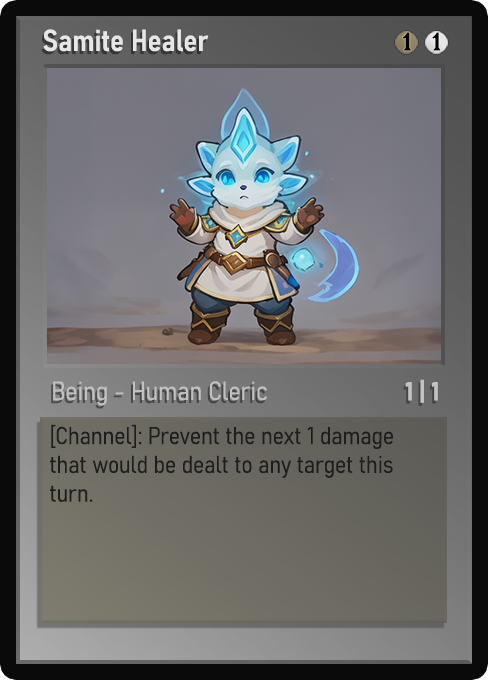
<style>
.page{position:relative;width:488px;height:680px}
.page>*{position:absolute;margin:0}
.t1{font:30px "Bahnschrift-SemiBoldSemiCondensed";color:#f2f2f2;font-weight:bold}
.t2{font:25px "WTRRoycroft";color:#000000;font-weight:bold;scale:1.09 1}
.t3{font:26px "Bahnschrift-LightSemiCondensed";color:#c8c8c8;font-weight:bold}
.t4{font:26px "Bahnschrift-BoldSemiCondensed";color:#c3c3c3;font-weight:bold}
.t5{font:24px "Bahnschrift-LightSemiCondensed";color:#1e1e1e;font-weight:bold}
</style>
<div class="page">
<p class="t1" style="left:43px;top:29px;width:166px;height:23px;opacity:0.9">Samite Healer</p>
<p class="t2" style="left:403px;top:32px;width:8px;height:19px">1</p>
<p class="t2" style="left:432px;top:32px;width:9px;height:19px">1</p>
<p class="t3" style="left:53px;top:381px;width:214px;height:25px;opacity:0.9">Being - Human Cleric</p>
<p class="t4" style="left:405px;top:379px;width:33px;height:24px">1 | 1</p>
<p class="t5" style="left:50px;top:424px;width:343px;height:78px">[Channel]: Prevent the next 1 damage that would be dealt to any target this turn.</p>
</div>
